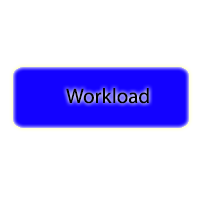
<style>
.page{position:relative;width:200px;height:200px;background:#ffffff}
.page>*{position:absolute;margin:0}
.t1{font:21px "MyriadPro-Regular";color:#010101}
</style>
<div class="page">
<p class="t1" style="left:66px;top:88px;width:83px;height:16px">Workload</p>
</div>
